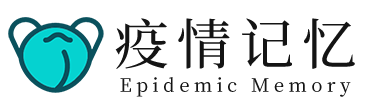
<style>
.page{position:relative;width:380px;height:105px;background:#ffffff}
.page>*{position:absolute;margin:0}
.t1{font:54.5px "SourceHanSerifCN-Medium";letter-spacing:0.15em;color:#141414}
.t2{font:18.3px "SourceHanSerifCN-Medium";letter-spacing:0.24em;color:#141414}
</style>
<div class="page">
<p class="t1" style="left:115px;top:18px;width:240px;height:51px">疫情记忆</p>
<p class="t2" style="left:120px;top:77px;width:231px;height:20px">Epidemic Memory</p>
</div>
